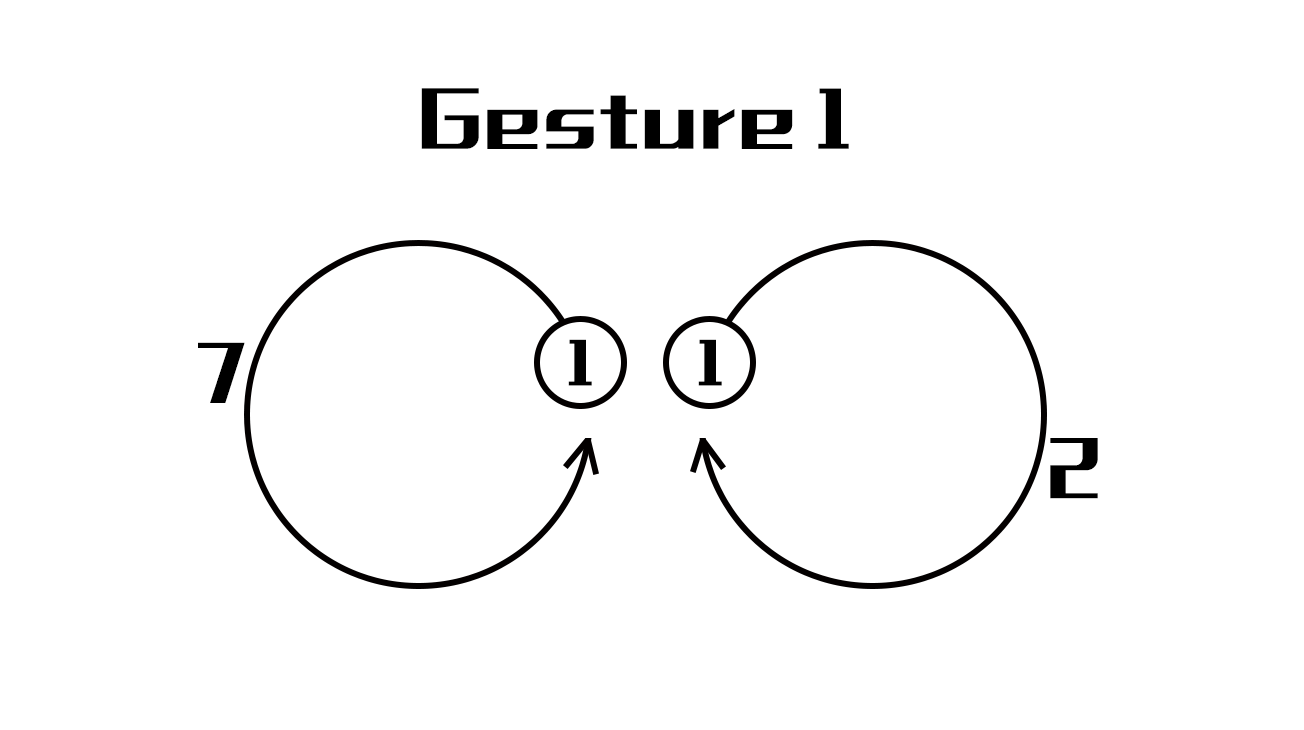
<style>
.page{position:relative;width:1304px;height:730px;background:#ffffff}
.page>*{position:absolute;margin:0}
.t1{font:66px "MFLiHei_Noncommercial-Regular";letter-spacing:0.05em;color:#000000}
.t2{font:50px "MFLiHei_Noncommercial-Regular";letter-spacing:0.05em;color:#000000}
</style>
<div class="page">
<p class="t1" style="left:421px;top:88px;width:428px;height:61px">Gesture 1</p>
<p class="t1" style="left:198px;top:342px;width:47px;height:61px">7</p>
<p class="t2" style="left:568px;top:339px;width:24px;height:47px">1</p>
<p class="t2" style="left:698px;top:339px;width:24px;height:47px">1</p>
<p class="t1" style="left:1050px;top:438px;width:48px;height:61px">2</p>
</div>
